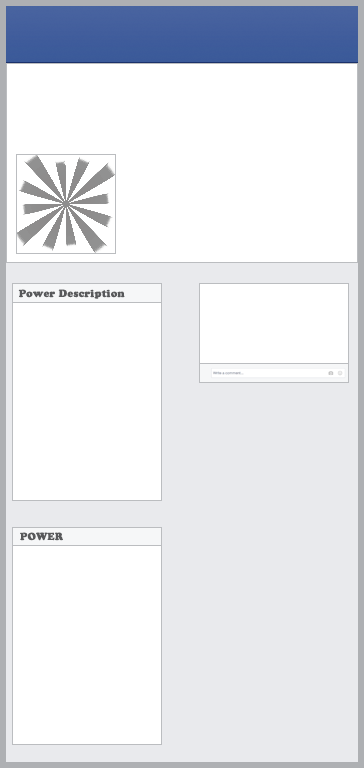
<style>
.page{position:relative;width:364px;height:768px;background:#ffffff}
.page>*{position:absolute;margin:0}
.t1{font:10px "CooperBlackStd";color:#58595b;font-weight:bold}
</style>
<div class="page">
<p class="t1" style="left:18px;top:289px;width:107px;height:10px">Power Description</p>
<p class="t1" style="left:20px;top:532px;width:43px;height:9px">POWER</p>
</div>
